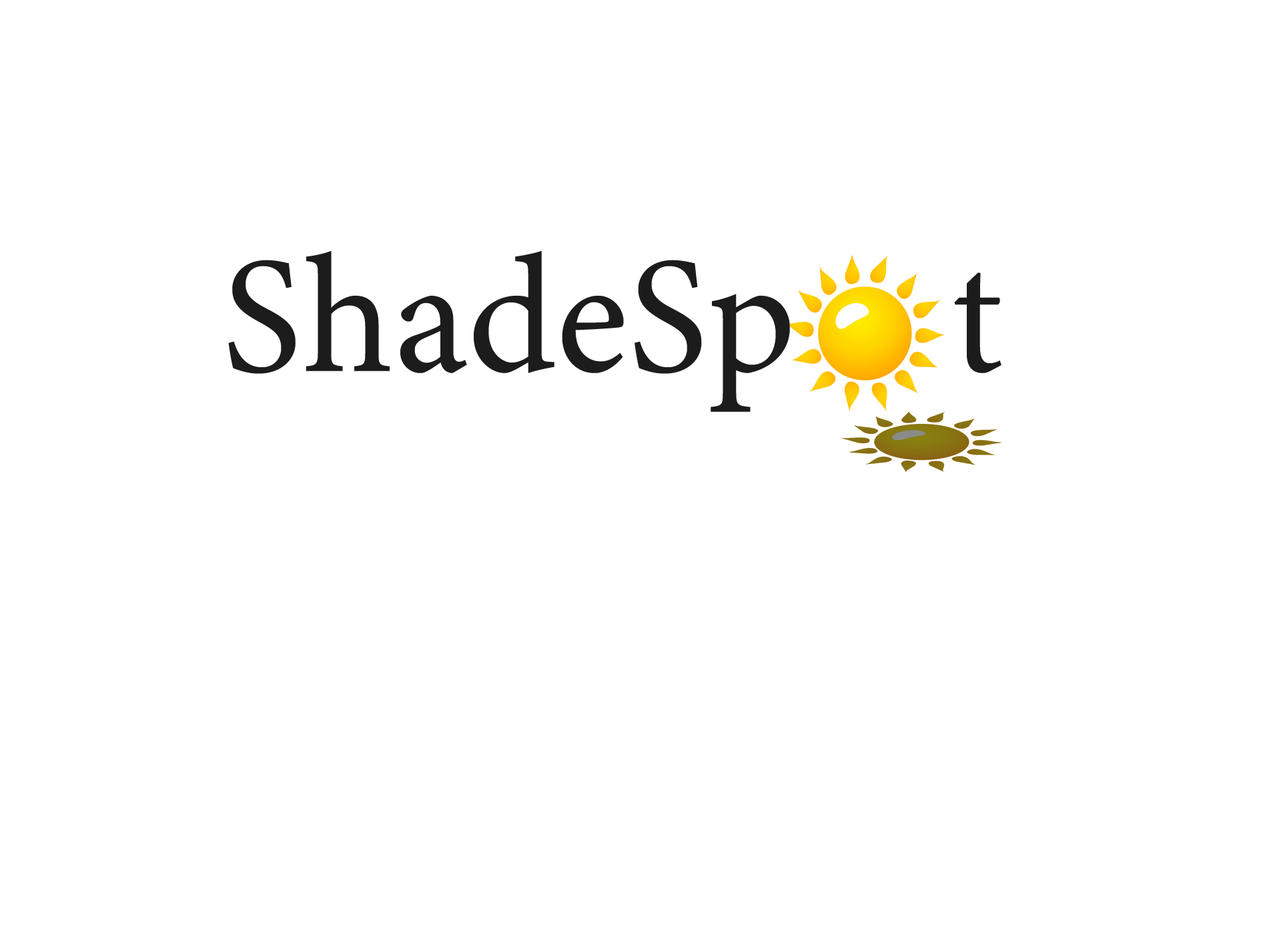
<style>
.page{position:relative;width:1261px;height:946px;background:#ffffff}
.page>*{position:absolute;margin:0}
.t1{font:166.8px "MinionVariableConcept-Roman";color:#1c1c1c}
</style>
<div class="page">
<p class="t1" style="left:228px;top:250px;width:774px;height:162px">ShadeSp    t</p>
</div>
